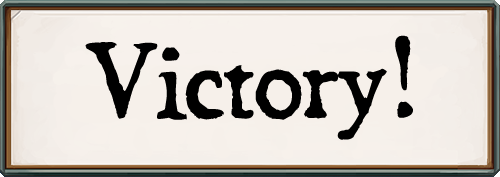
<style>
.page{position:relative;width:500px;height:177px}
.page>*{position:absolute;margin:0}
.t1{font:92px "Dominican";color:#000000}
</style>
<div class="page">
<p class="t1" style="left:85px;top:35px;width:328px;height:105px">Victory!</p>
</div>
